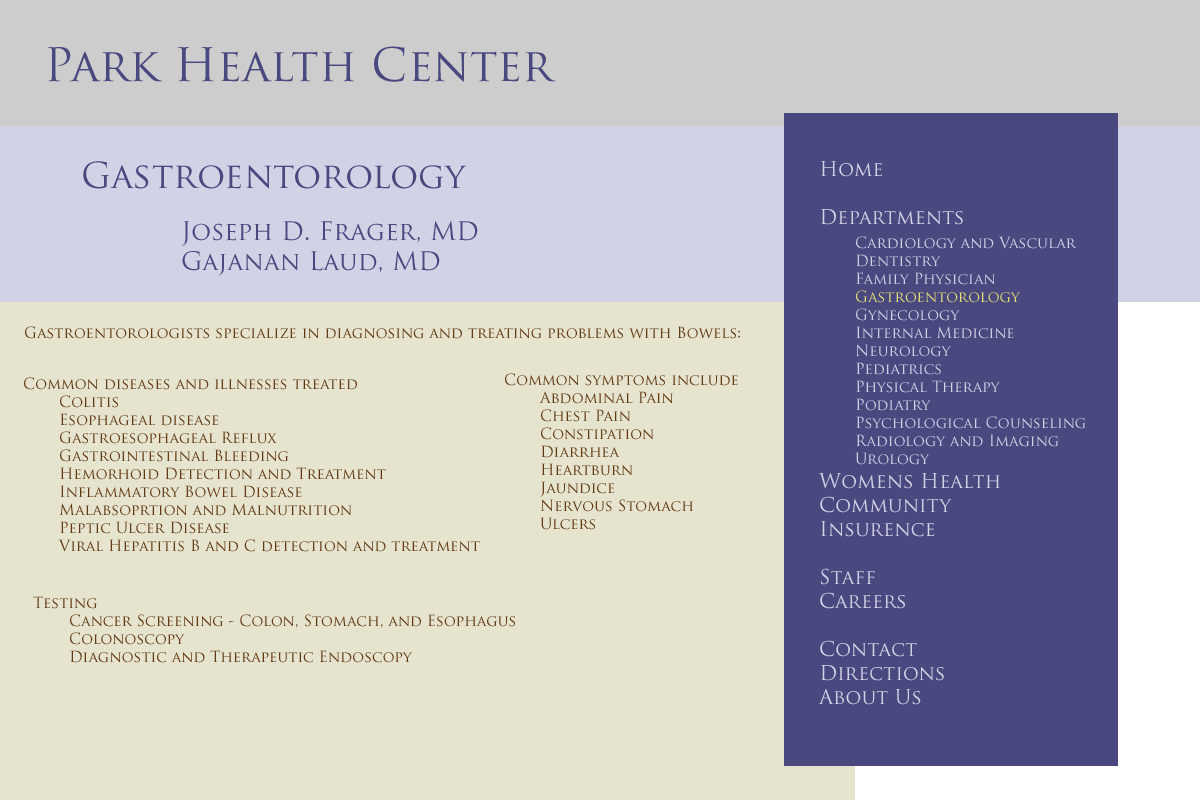
<style>
.page{position:relative;width:1200px;height:800px;background:#e6e3cf}
.page>*{position:absolute;margin:0}
.t1{font:45px "TrajanPro-Regular";color:#494980}
.t2{font:35px "TrajanPro-Regular";color:#494980}
.t3{font:15px "TrajanPro-Regular";color:#d2d2e6}
.t4{font:20px "TrajanPro-Regular";color:#d2d2e6}
.t5{font:15px "TrajanPro-Regular";color:#e6e073}
.t6{font:25px "TrajanPro-Regular";color:#494980}
.t7{font:15px "TrajanPro-Regular";color:#603913}
</style>
<div class="page">
<p class="t1" style="left:48px;top:46px;width:508px;height:36px">Park Health Center</p>
<p class="t2" style="left:83px;top:161px;width:384px;height:28px">Gastroentorology</p>
<p class="t3" style="left:818px;top:161px;width:268px;height:544px"><span class="t4">Home<br><br>Departments<br> </span>Cardiology and Vascular<br> Dentistry<br> Family Physician<br> <span class="t5">Gastroentorology<br></span> Gynecology<br> Internal Medicine<br> Neurology<br> Pediatrics<br> Physical Therapy<br> Podiatry<br> Psychological Counseling<br> Radiology and Imaging<br> Urology<br><span class="t4">Womens Health<br>Community<br>Insurence<br><br>Staff<br>Careers<br><br>Contact<br>Directions<br>About Us</span></p>
<p class="t6" style="left:182px;top:221px;width:296px;height:55px">Joseph D. Frager, MD<br>Gajanan Laud, MD</p>
<p class="t7" style="left:25px;top:326px;width:715px;height:13px">Gastroentorologists specialize in diagnosing and treating problems with Bowels:</p>
<p class="t7" style="left:24px;top:377px;width:456px;height:175px">Common diseases and illnesses treated<br> Colitis<br> Esophageal disease<br> Gastroesophageal Reflux<br> Gastrointestinal Bleeding<br> Hemorhoid Detection and Treatment<br> Inflammatory Bowel Disease<br> Malabsoprtion and Malnutrition<br> Peptic Ulcer Disease<br> Viral Hepatitis B and C detection and treatment</p>
<p class="t7" style="left:505px;top:373px;width:233px;height:157px">Common symptoms include<br> Abdominal Pain<br> Chest Pain<br> Constipation<br> Diarrhea<br> Heartburn<br> Jaundice<br> Nervous Stomach<br> Ulcers</p>
<p class="t7" style="left:33px;top:596px;width:482px;height:67px">Testing<br> Cancer Screening - Colon, Stomach, and Esophagus<br> Colonoscopy<br> Diagnostic and Therapeutic Endoscopy</p>
</div>
